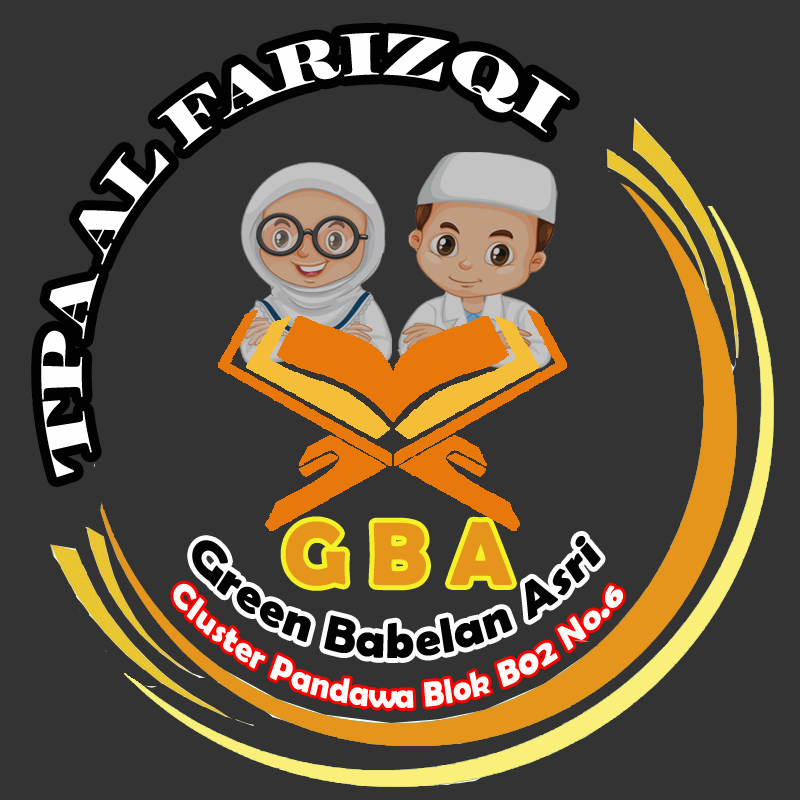
<style>
.page{position:relative;width:800px;height:800px;background:#333333}
.page>*{position:absolute;margin:0}
.t1{font:90px "BerlinSansFBDemi-Bold";color:#e6951c}
.t2{font:50px "BerlinSansFBDemi-Bold";color:#030303;scale:0.85 1}
.t3{font:34.9px "BerlinSansFBDemi-Bold";color:#fcfdfb;scale:0.85 1}
</style>
<div class="page">
<p class="t1" style="left:285px;top:521px;width:227px;height:65px">G B A</p>
<p class="t2" style="left:192px;top:536px;width:409px;height:122px">Green Babelan Asri</p>
<p class="t3" style="left:173px;top:583px;width:450px;height:125px">Cluster Pandawa Blok B02 No.6</p>
</div>
